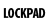
<style>
.page{position:relative;width:50px;height:25px;background:#ffffff}
.page>*{position:absolute;margin:0}
.t1{font:14px "MyriadPro-BoldCond";color:#000000}
</style>
<div class="page">
<p class="t1" style="left:3px;top:8px;width:43px;height:10px">LOCKPAD</p>
</div>
